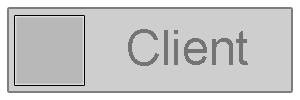
<style>
.page{position:relative;width:300px;height:100px;background:#cecece}
.page>*{position:absolute;margin:0}
.t1{font:48px "ArialMT";color:#747474}
</style>
<div class="page">
<p class="t1" style="left:128px;top:29px;width:120px;height:37px">Client</p>
</div>
